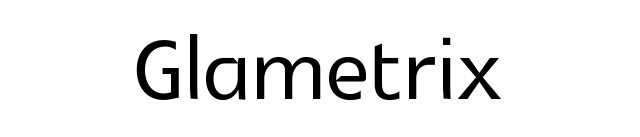
<style>
.page{position:relative;width:640px;height:137px;background:#ffffff}
.page>*{position:absolute;margin:0}
.t1{font:120px "Glametrix";color:#000000}
</style>
<div class="page">
<p class="t1" style="left:136px;top:34px;width:365px;height:67px">Glametrix</p>
</div>
